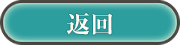
<style>
.page{position:relative;width:180px;height:45px}
.page>*{position:absolute;margin:0}
.t1{font:24px "RyuminPr6N-ExBold";color:#fff9f4}
</style>
<div class="page">
<p class="t1" style="left:66px;top:13px;width:46px;height:22px">返回</p>
</div>
